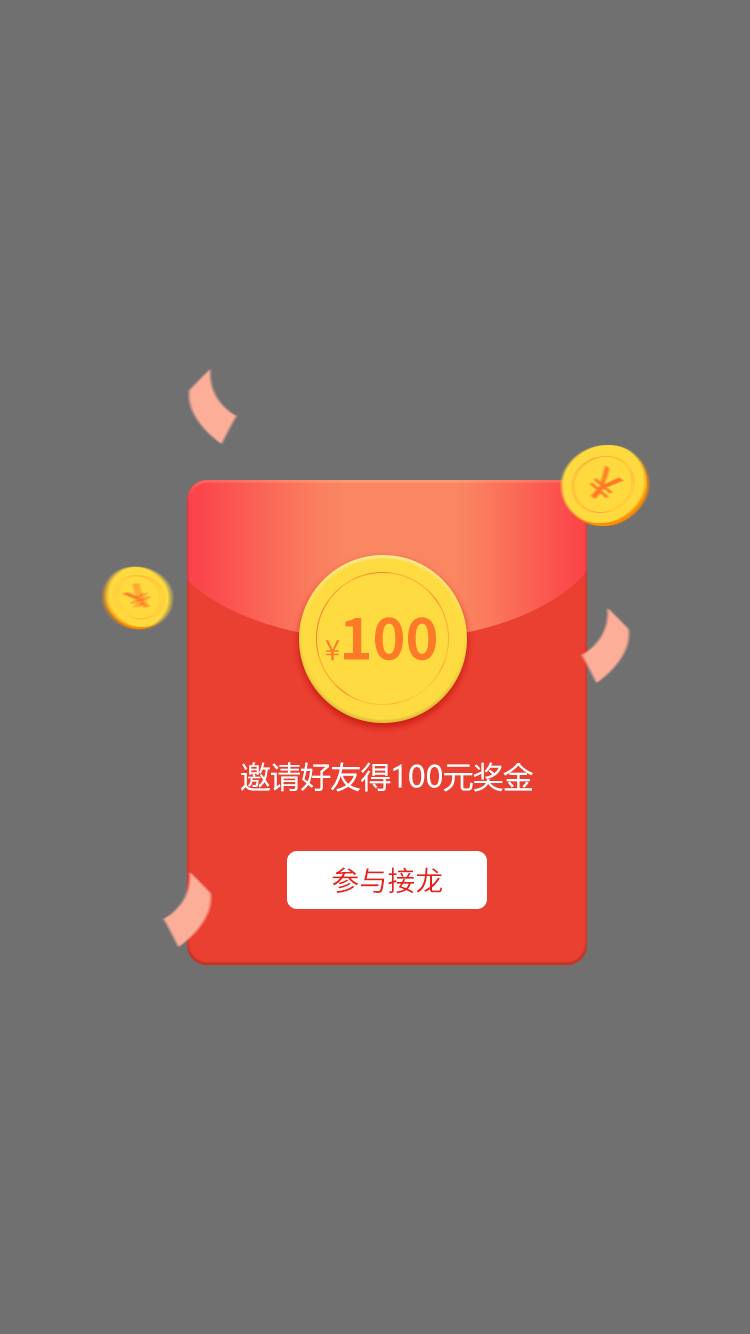
<style>
.page{position:relative;width:750px;height:1334px;background:#707070}
.page>*{position:absolute;margin:0}
.t1{font:56px "SourceHanSansCN-Bold";color:#fe7928;text-transform:uppercase}
.t2{font:28px "SourceHanSansCN-Regular";color:#fe7928;text-transform:uppercase}
.t3{font:30px "MicrosoftYaHei";color:#ffffff;text-transform:uppercase}
.t4{font:28px "SourceHanSansCN-Regular";color:#e61f18;text-transform:uppercase}
</style>
<div class="page">
<p class="t1" style="left:344px;top:617px;width:92px;height:44px">100</p>
<p class="t2" style="left:325px;top:640px;width:15px;height:21px">¥</p>
<p class="t3" style="left:241px;top:762px;width:292px;height:30px">邀请好友得100元奖金</p>
<p class="t4" style="left:332px;top:867px;width:110px;height:27px">参与接龙</p>
</div>
